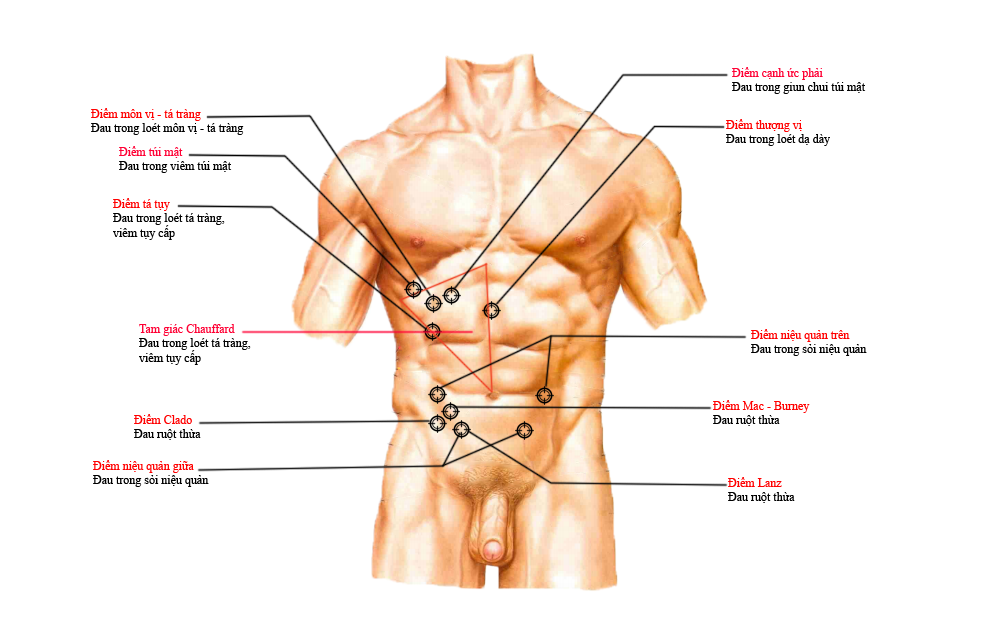
<style>
.page{position:relative;width:1008px;height:629px;background:#ffffff}
.page>*{position:absolute;margin:0}
.t1{font:12px "TimesNewRomanPSMT";color:#000000}
.t2{font:12px "TimesNewRomanPSMT";color:#ff0034}
.t3{font:12px "TimesNewRomanPSMT";color:#ff0000}
.t4{font:12px "TimesNewRomanPSMT";color:#010101}
</style>
<div class="page">
<p class="t1" style="left:732px;top:67px;width:134px;height:27px"><span class="t2">Điểm cạnh ức phải<br></span>Đau trong giun chui túi mật</p>
<p class="t1" style="left:91px;top:108px;width:153px;height:27px"><span class="t3">Điểm môn vị - tá tràng<br></span>Đau trong loét môn vị - tá tràng</p>
<p class="t4" style="left:726px;top:119px;width:104px;height:27px"><span class="t3">Điểm thượng vị<br></span>Đau trong loét dạ dày</p>
<p class="t1" style="left:119px;top:146px;width:113px;height:27px"><span class="t2">Điểm túi mật<br></span>Đau trong viêm túi mật</p>
<p class="t1" style="left:113px;top:198px;width:112px;height:42px"><span class="t3">Điểm tá tụy<br></span>Đau trong loét tá tràng,<br>viêm tụy cấp</p>
<p class="t1" style="left:139px;top:324px;width:112px;height:41px"><span class="t2">Tam giác Chauffard<br></span>Đau trong loét tá tràng,<br>viêm tụy cấp</p>
<p class="t1" style="left:751px;top:329px;width:116px;height:27px"><span class="t3">Điểm niệu quản trên<br></span>Đau trong sỏi niệu quản</p>
<p class="t3" style="left:713px;top:400px;width:97px;height:26px">Điểm Mac - Burney<br><span class="t1">Đau ruột thừa</span></p>
<p class="t1" style="left:134px;top:414px;width:67px;height:26px"><span class="t3">Điểm Clado<br></span>Đau ruột thừa</p>
<p class="t1" style="left:93px;top:460px;width:116px;height:27px"><span class="t3">Điểm niệu quản giữa<br></span>Đau trong sỏi niệu quản</p>
<p class="t1" style="left:728px;top:477px;width:67px;height:26px"><span class="t3">Điểm Lanz<br></span>Đau ruột thừa</p>
</div>
